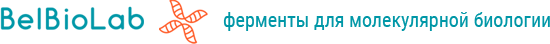
<style>
.page{position:relative;width:550px;height:44px;background:#ffffff}
.page>*{position:absolute;margin:0}
.t1{font:20px "RobotoCondensed-Regular";color:#0097a7}
</style>
<div class="page">
<p class="t1" style="left:223px;top:12px;width:327px;height:19px">ферменты для молекулярной биологии</p>
</div>
